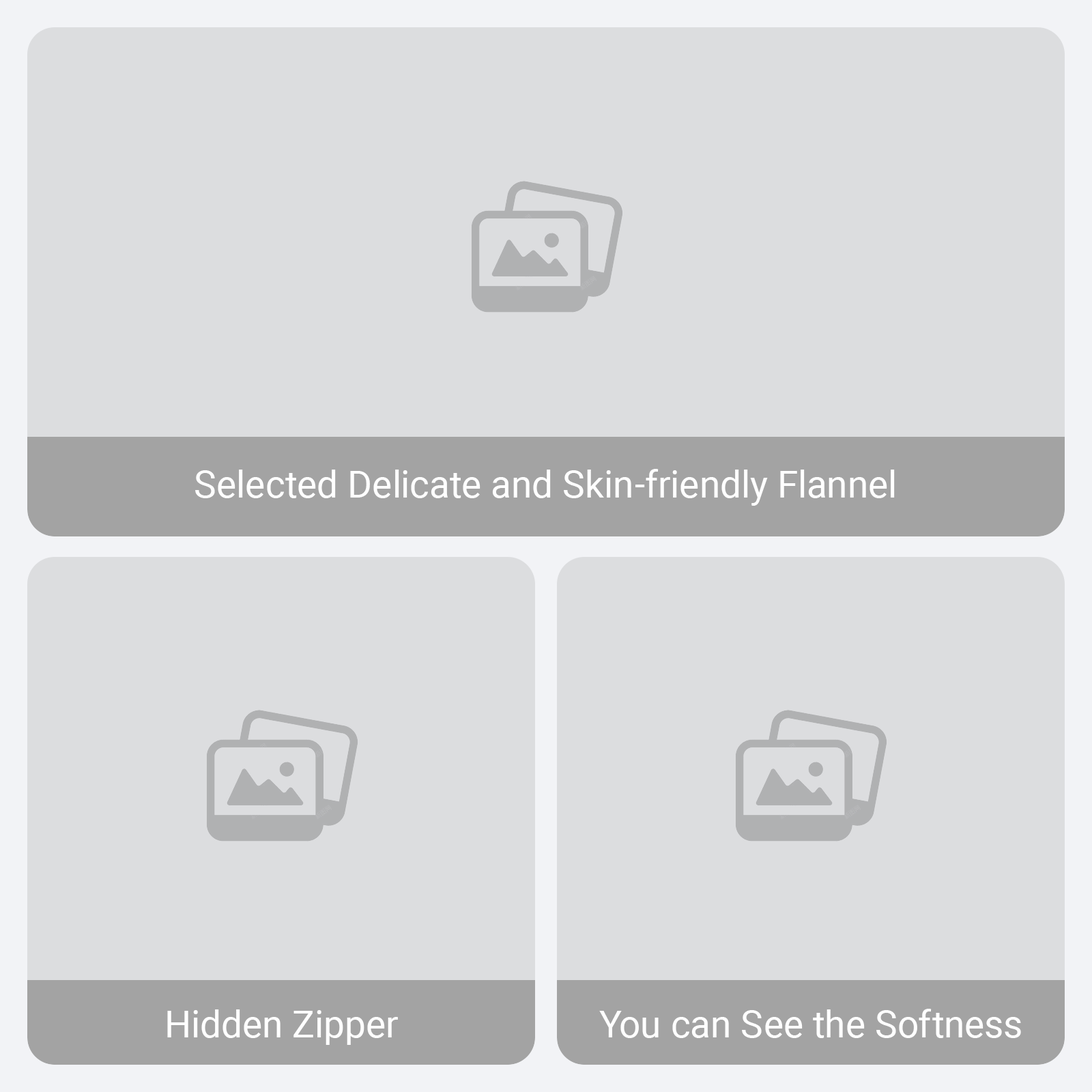
<style>
.page{position:relative;width:1092px;height:1092px;background:#dcdddf}
.page>*{position:absolute;margin:0}
.t1{font:37.9px "Roboto-Regular";color:#ffffff}
</style>
<div class="page">
<p class="t1" style="left:195px;top:469px;width:700px;height:37px">Selected Delicate and Skin-friendly Flannel</p>
<p class="t1" style="left:167px;top:1009px;width:231px;height:36px">Hidden Zipper</p>
<p class="t1" style="left:599px;top:1009px;width:422px;height:29px">You can See the Softness</p>
</div>
